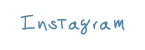
<style>
.page{position:relative;width:145px;height:50px;background:#ffffff}
.page>*{position:absolute;margin:0}
.t1{font:18px "BojarskiLight";letter-spacing:0.1em;color:#5183a7;font-weight:bold}
</style>
<div class="page">
<p class="t1" style="left:20px;top:14px;width:105px;height:21px">Instagram</p>
</div>
